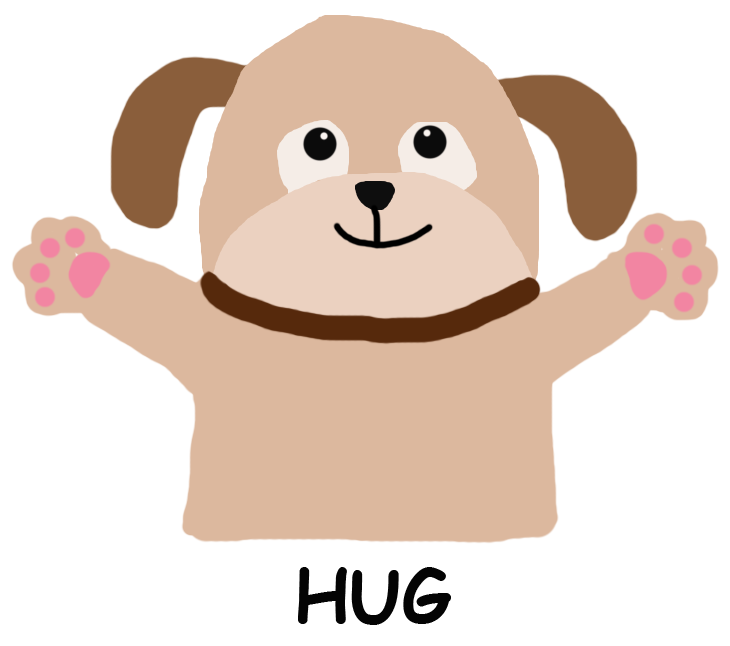
<style>
.page{position:relative;width:730px;height:646px;background:#ffffff}
.page>*{position:absolute;margin:0}
.t1{font:72px "ComicSansMS-Bold";color:#040404}
</style>
<div class="page">
<p class="t1" style="left:298px;top:567px;width:153px;height:58px">HUG</p>
</div>
